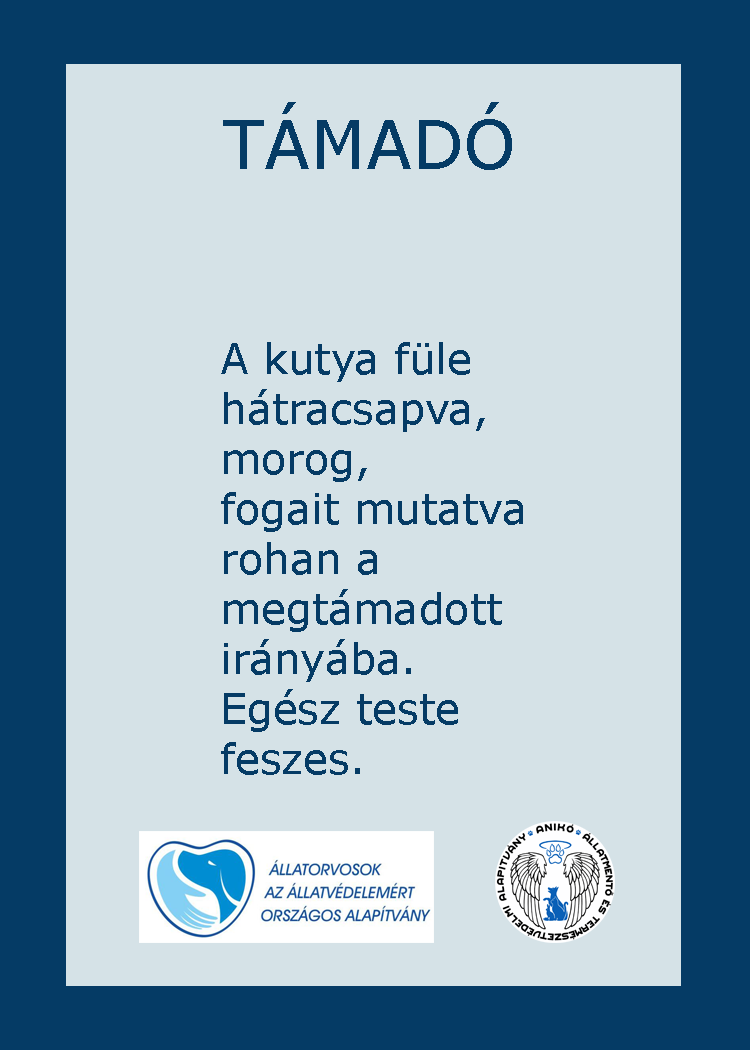
<style>
.page{position:relative;width:750px;height:1050px;background:#d5e2e7}
.page>*{position:absolute;margin:0}
.t1{font:66.7px "Verdana";color:#053b65}
.t2{font:66.7px "GravitateBRK";color:#053b65}
.t3{font:41.7px "Verdana";color:#053b65}
</style>
<div class="page">
<p class="t1" style="left:223px;top:102px;width:289px;height:68px"><span class="t2">         </span>TÁMADÓ</p>
<p class="t3" style="left:221px;top:342px;width:302px;height:433px">A kutya füle <br>hátracsapva,<br>morog,<br>fogait mutatva <br>rohan a<br>megtámadott <br>irányába.<br>Egész teste <br>feszes.</p>
</div>
